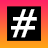
<style>
.page{position:relative;width:48px;height:48px;background:#000000}
.page>*{position:absolute;margin:0}
.t1{font:37.4px "Jaapokki-Regular";letter-spacing:-0.075em;color:#ffffff}
</style>
<div class="page">
<p class="t1" style="left:11px;top:9px;width:26px;height:29px">#</p>
</div>
